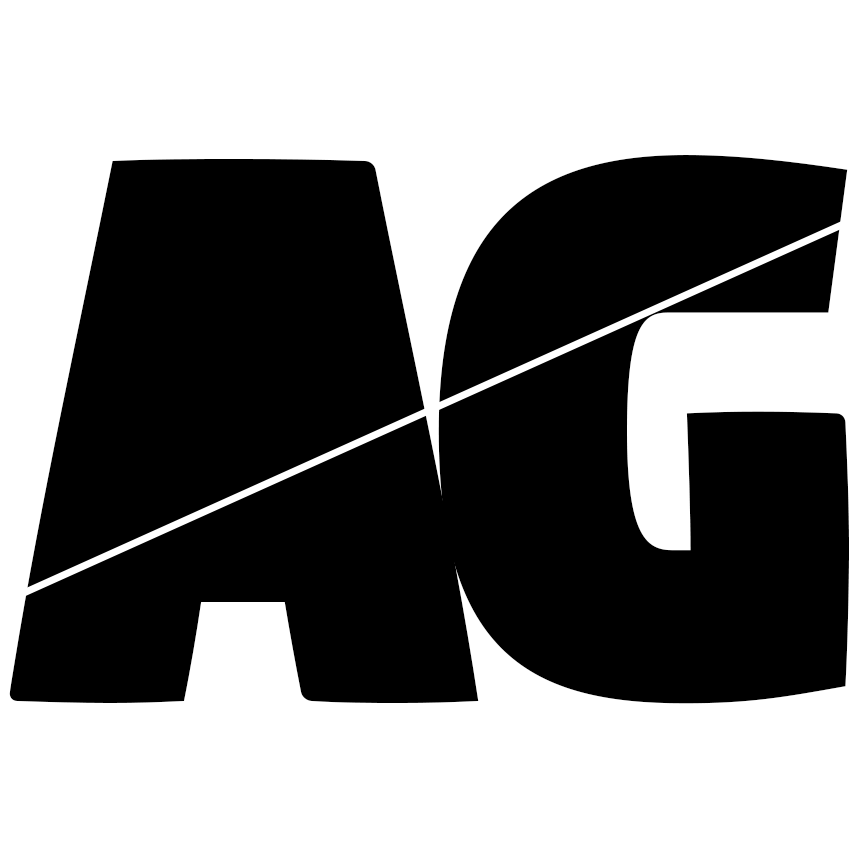
<style>
.page{position:relative;width:862px;height:862px;background:#ffffff}
.page>*{position:absolute;margin:0}
.t1{font:900.4px "Digitalt";color:#000000}
</style>
<div class="page">
<p class="t1" style="left:9px;top:159px;width:470px;height:544px">A</p>
<p class="t1" style="left:438px;top:155px;width:411px;height:549px">G</p>
</div>
